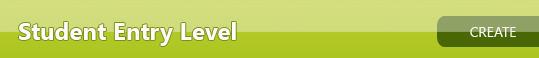
<style>
.page{position:relative;width:539px;height:58px}
.page>*{position:absolute;margin:0}
.t1{font:24px "SegoeUI-Bold";color:#fefefe}
.t2{font:14px "SegoeUI";color:#f6f7f1}
</style>
<div class="page">
<p class="t1" style="left:19px;top:22px;width:217px;height:24px">Student Entry Level</p>
<p class="t2" style="left:470px;top:27px;width:46px;height:10px">CREATE</p>
</div>
